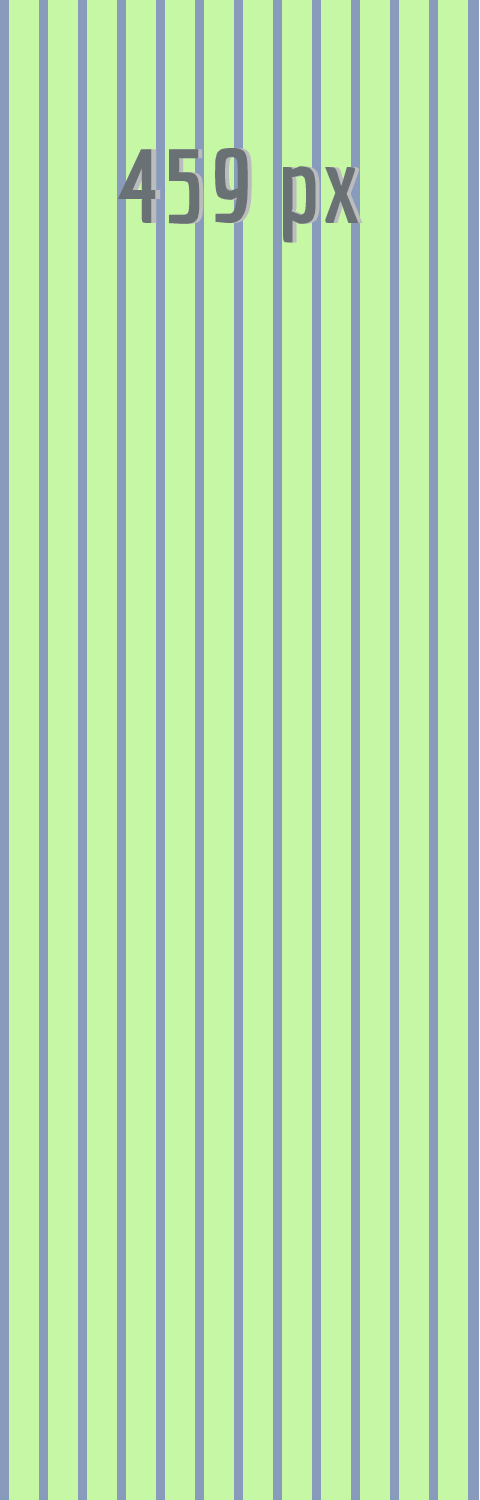
<style>
.page{position:relative;width:480px;height:1500px;background:#c6f7a5}
.page>*{position:absolute;margin:0}
.t1{font:103.6px "Economica-Bold";letter-spacing:0.03em;color:#6a7174}
.t2{font:103.6px "Economica-Bold";letter-spacing:0.03em}
</style>
<div class="page">
<p class="t1" style="left:118px;top:148px;width:241px;height:95px">459 px</p>
<p class="t2" style="left:123px;top:148px;width:240px;height:95px">459 px</p>
</div>
